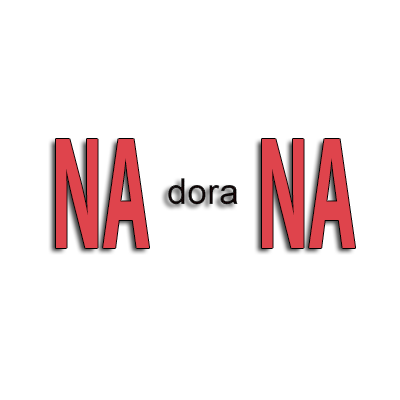
<style>
.page{position:relative;width:400px;height:400px;background:#ffffff}
.page>*{position:absolute;margin:0}
.t1{font:161.9px "MyriadPro-Bold";color:#df444c;scale:0.46 1}
</style>
<div class="page">
<p class="t1" style="left:56px;top:139px;width:299px;height:109px">NA       NA</p>
</div>
